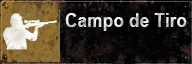
<style>
.page{position:relative;width:192px;height:64px}
.page>*{position:absolute;margin:0}
.t1{font:18.5px "Arial-BoldMT";letter-spacing:0.005em;scale:0.94 1}
</style>
<div class="page">
<p class="t1" style="left:65px;top:13px;width:122px;height:18px">Campo de Tiro</p>
</div>
